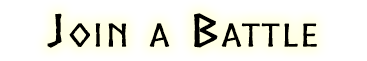
<style>
.page{position:relative;width:367px;height:61px;background:#ffffff}
.page>*{position:absolute;margin:0}
.t1{font:42.5px "Norse";color:#000000;font-variant:small-caps;font-weight:bold;scale:1.76 1}
</style>
<div class="page">
<p class="t1" style="left:47px;top:13px;width:270px;height:35px">Join a Battle</p>
</div>
